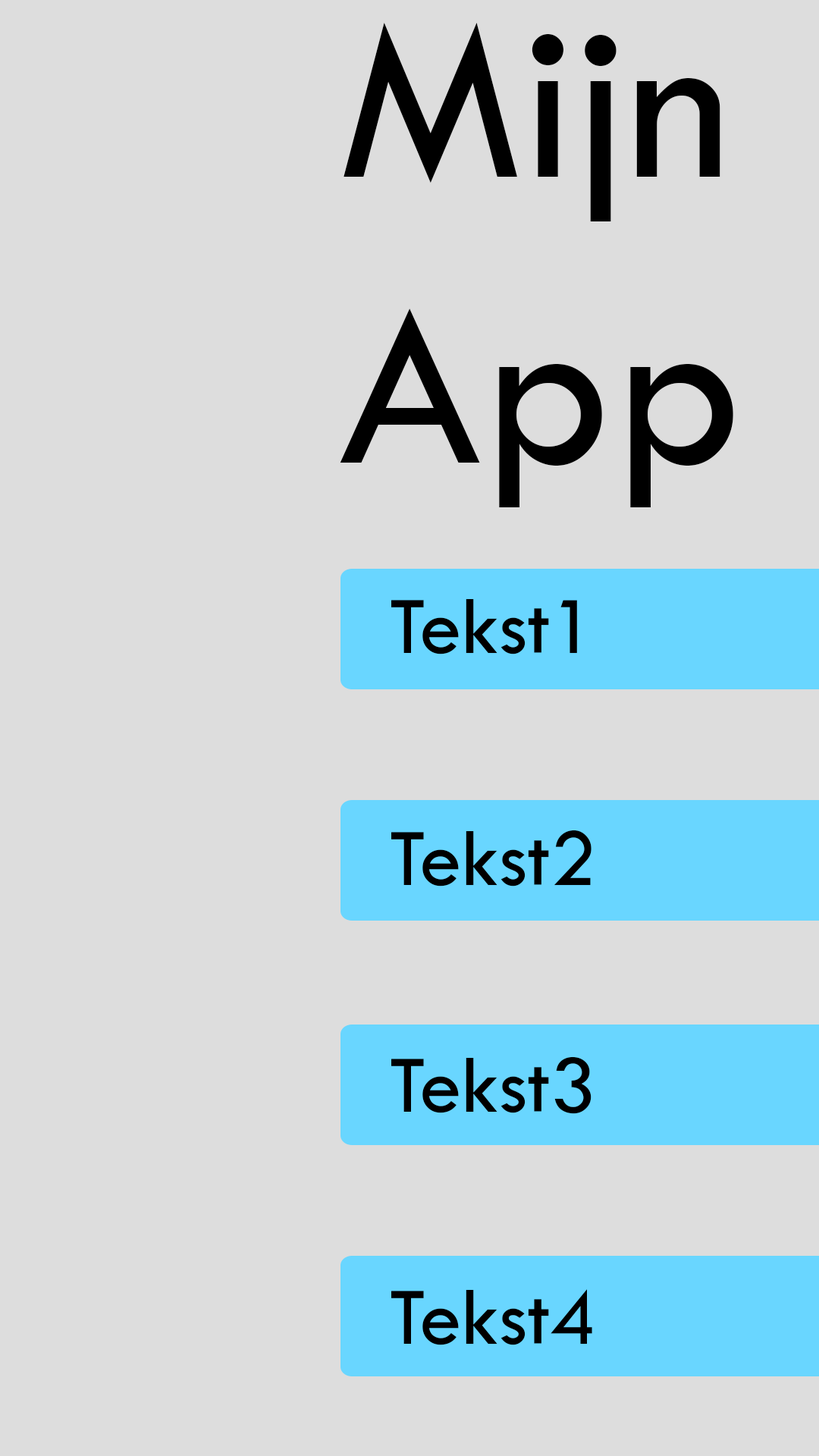
<style>
.page{position:relative;width:819px;height:1456px;background:#dddddd}
.page>*{position:absolute;margin:0}
.t1{font:237.9px "TwCenMT-Regular";color:#000000}
.t2{font:84.6px "TwCenMT-Regular";color:#000000}
</style>
<div class="page">
<p class="t1" style="left:340px;top:23px;width:393px;height:484px">Mijn<br>App</p>
<p class="t2" style="left:391px;top:599px;width:186px;height:55px">Tekst1</p>
<p class="t2" style="left:391px;top:830px;width:200px;height:56px">Tekst2</p>
<p class="t2" style="left:391px;top:1056px;width:200px;height:58px">Tekst3</p>
<p class="t2" style="left:391px;top:1289px;width:201px;height:56px">Tekst4</p>
</div>
